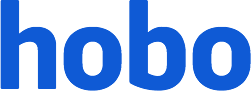
<style>
.page{position:relative;width:251px;height:91px;background:#ffffff}
.page>*{position:absolute;margin:0}
.t1{font:120px "Webnar-Bold";color:#0f5ad5}
</style>
<div class="page">
<p class="t1" style="left:0px;top:0px;width:251px;height:91px">hobo</p>
</div>
